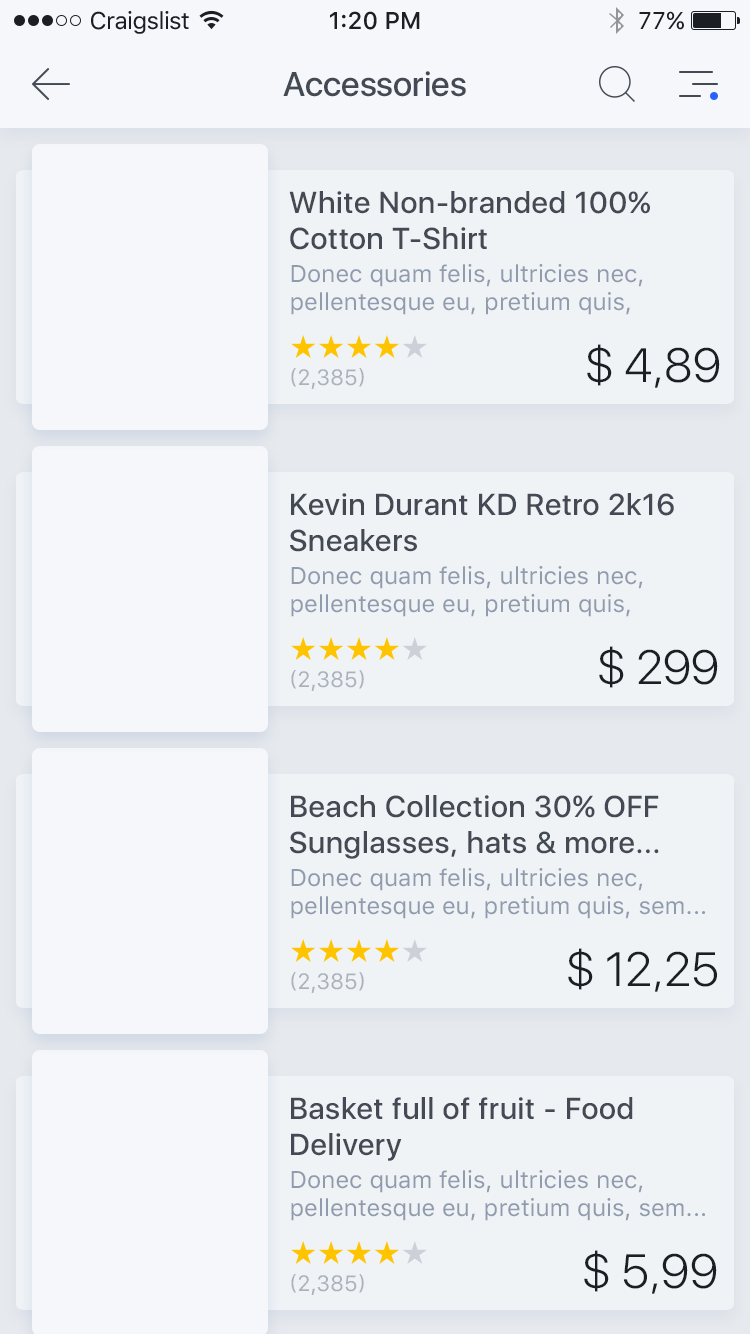
<style>
.page{position:relative;width:750px;height:1334px;background:#f0f3f6}
.page>*{position:absolute;margin:0}
.t1{font:24px "SFUIText-Regular";letter-spacing:-0.025em;color:#1b1e23}
.t2{font:24px "SFUIText-Medium";color:#1b1e23}
.t3{font:24px "SFUIText-Regular";color:#1b1e23}
.t4{font:34px "SFUIDisplay-Medium";color:#434a54}
.t5{font:30px "SFUIDisplay-Medium";letter-spacing:0.025em;color:#434a54}
.t6{font:24px "SFUIText-Regular";color:#909bad}
.t7{font:48px "SFUIDisplay-Light";color:#1b1e23}
.t8{font:22px "SFUIText-Regular";color:#aab2bd;text-transform:uppercase}
</style>
<div class="page">
<p class="t1" style="left:91px;top:11px;width:98px;height:23px">Craigslist</p>
<p class="t2" style="left:330px;top:11px;width:90px;height:19px">1:20 PM</p>
<p class="t3" style="left:639px;top:11px;width:45px;height:19px">77%</p>
<p class="t4" style="left:283px;top:71px;width:183px;height:26px">Accessories</p>
<p class="t5" style="left:289px;top:191px;width:361px;height:59px">White Non-branded 100% Cotton T-Shirt</p>
<p class="t6" style="left:291px;top:264px;width:352px;height:51px">Donec quam felis, ultricies nec, pellentesque eu, pretium quis, sem... Nulla consequat massa quis enim.</p>
<p class="t7" style="left:587px;top:344px;width:133px;height:44px">$ 4,89</p>
<p class="t8" style="left:291px;top:368px;width:73px;height:21px">(2,385)</p>
<p class="t5" style="left:290px;top:493px;width:384px;height:59px">Kevin Durant KD Retro 2k16 Sneakers</p>
<p class="t6" style="left:291px;top:566px;width:352px;height:51px">Donec quam felis, ultricies nec, pellentesque eu, pretium quis, sem... Nulla consequat massa quis enim.</p>
<p class="t7" style="left:599px;top:646px;width:119px;height:42px">$ 299</p>
<p class="t8" style="left:291px;top:670px;width:73px;height:21px">(2,385)</p>
<p class="t5" style="left:290px;top:795px;width:369px;height:64px">Beach Collection 30% OFF<br>Sunglasses, hats &amp; more...</p>
<p class="t6" style="left:291px;top:868px;width:414px;height:51px">Donec quam felis, ultricies nec, pellentesque eu, pretium quis, sem... Nulla consequat massa quis enim.</p>
<p class="t7" style="left:568px;top:948px;width:149px;height:44px">$ 12,25</p>
<p class="t8" style="left:291px;top:972px;width:73px;height:21px">(2,385)</p>
<p class="t5" style="left:291px;top:1097px;width:342px;height:64px">Basket full of fruit - Food Delivery</p>
<p class="t6" style="left:291px;top:1170px;width:414px;height:51px">Donec quam felis, ultricies nec, pellentesque eu, pretium quis, sem... Nulla consequat massa quis enim.</p>
<p class="t7" style="left:584px;top:1250px;width:133px;height:44px">$ 5,99</p>
<p class="t8" style="left:291px;top:1274px;width:73px;height:21px">(2,385)</p>
</div>
